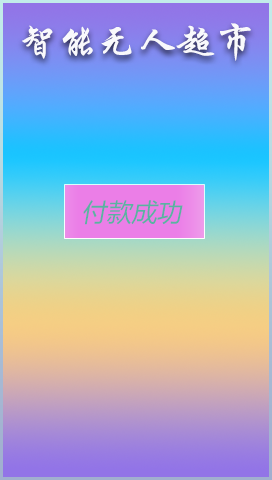
<style>
.page{position:relative;width:272px;height:480px}
.page>*{position:absolute;margin:0}
.t1{font:39.6px "STXingkai";color:#f9f9fc}
.t2{font:25px "MicrosoftYaHei";color:#5ab2a2;font-style:italic}
</style>
<div class="page">
<p class="t1" style="left:22px;top:23px;width:229px;height:38px">智能无人超市</p>
<p class="t2" style="left:83px;top:200px;width:100px;height:25px">付款成功！!！</p>
</div>
